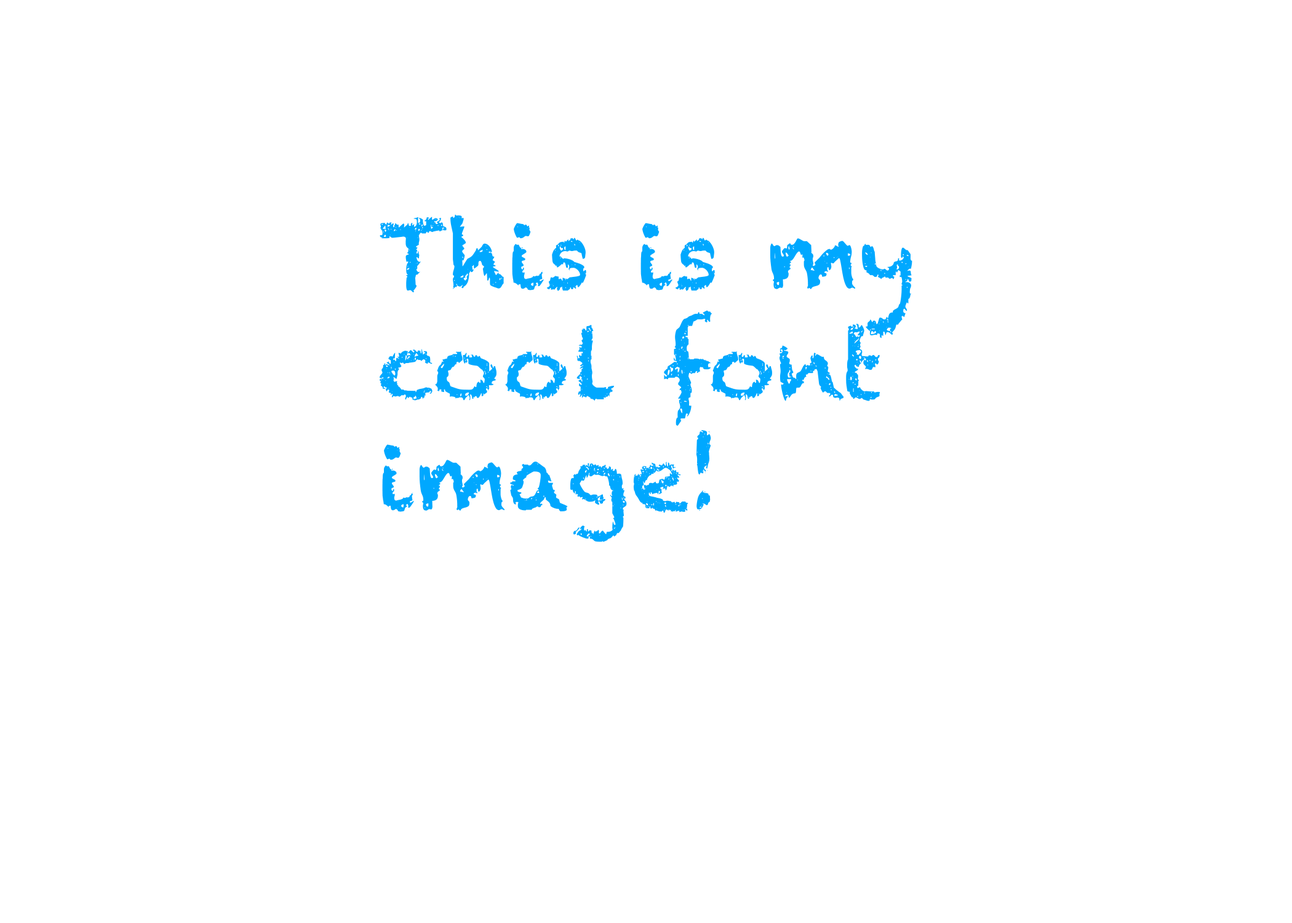
<style>
.page{position:relative;width:1292px;height:923px;background:#ffffff}
.page>*{position:absolute;margin:0}
.t1{font:92.3px "Chalkduster";color:#00a8ff}
</style>
<div class="page">
<p class="t1" style="left:380px;top:214px;width:532px;height:328px">This is my<br>cool font <br>image!</p>
</div>
